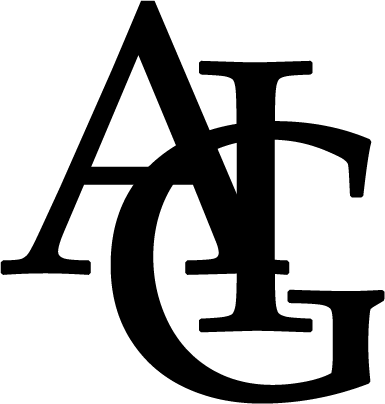
<style>
.page{position:relative;width:385px;height:404px;background:#ffffff}
.page>*{position:absolute;margin:0}
.t1{font:389px "PalatinoLinotype-Roman";color:#000000;font-weight:bold}
</style>
<div class="page">
<p class="t1" style="left:0px;top:0px;width:290px;height:275px">A</p>
<p class="t1" style="left:199px;top:60px;width:114px;height:273px">I</p>
<p class="t1" style="left:110px;top:121px;width:275px;height:283px">G</p>
</div>
